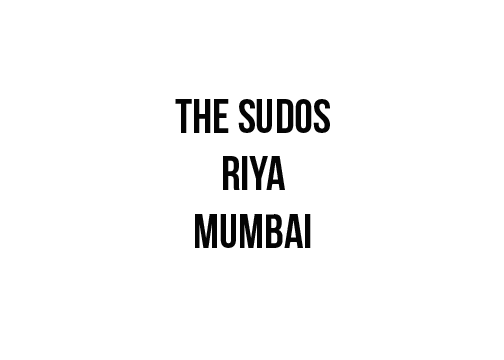
<style>
.page{position:relative;width:504px;height:360px;background:#ffffff}
.page>*{position:absolute;margin:0}
.t1{font:48px "BebasNeueBold";color:#040404}
</style>
<div class="page">
<p class="t1" style="left:175px;top:99px;width:155px;height:149px;text-align:center">The sudos<br>riya<br>mumbai</p>
</div>
